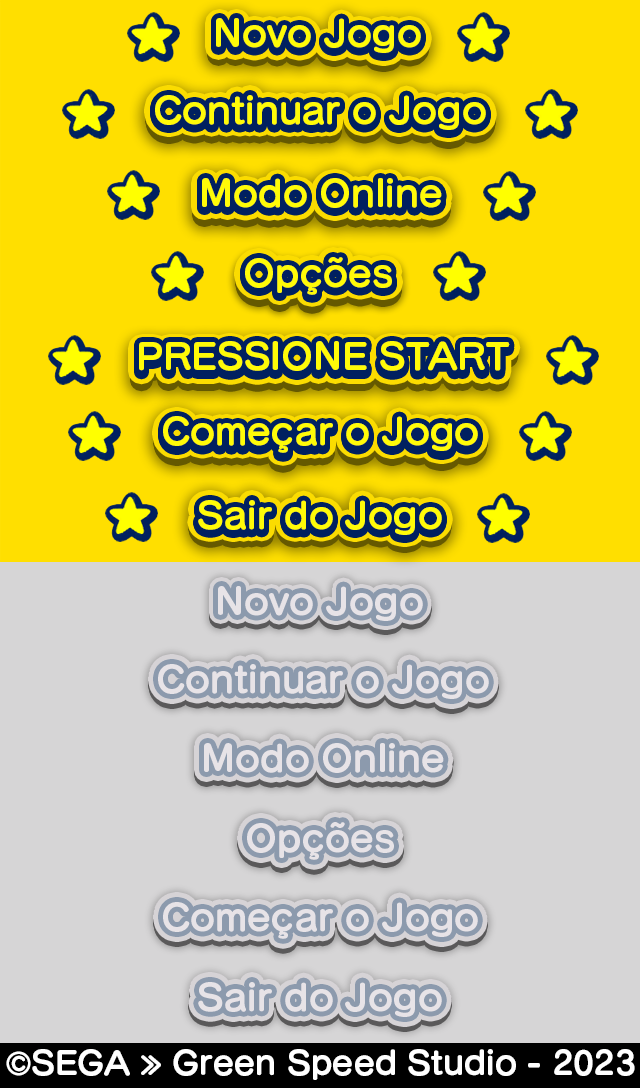
<style>
.page{position:relative;width:640px;height:1088px;background:#d6d5d6}
.page>*{position:absolute;margin:0}
.t1{font:36.1px "SeuratPro-B";color:#fffb08}
.t2{font:36.1px "SeuratPro-B"}
.t3{font:36.1px "SeuratPro-B";color:#e7e3e7}
.t4{font:32px "SeuratPro-B";color:#ffffff}
.t5{font:32px "SeuratPro-B"}
</style>
<div class="page">
<p class="t1" style="left:216px;top:20px;width:205px;height:35px">Novo Jogo</p>
<p class="t2" style="left:216px;top:21px;width:205px;height:35px">Novo Jogo</p>
<p class="t1" style="left:216px;top:20px;width:205px;height:35px">Novo Jogo</p>
<p class="t1" style="left:216px;top:19px;width:205px;height:35px">Novo Jogo</p>
<p class="t1" style="left:216px;top:18px;width:205px;height:35px">Novo Jogo</p>
<p class="t1" style="left:155px;top:96px;width:331px;height:35px">Continuar o Jogo</p>
<p class="t2" style="left:155px;top:98px;width:331px;height:35px">Continuar o Jogo</p>
<p class="t1" style="left:155px;top:97px;width:331px;height:35px">Continuar o Jogo</p>
<p class="t1" style="left:155px;top:96px;width:331px;height:35px">Continuar o Jogo</p>
<p class="t1" style="left:155px;top:95px;width:331px;height:35px">Continuar o Jogo</p>
<p class="t1" style="left:202px;top:180px;width:240px;height:30px">Modo Online</p>
<p class="t2" style="left:202px;top:181px;width:240px;height:30px">Modo Online</p>
<p class="t1" style="left:202px;top:180px;width:240px;height:30px">Modo Online</p>
<p class="t1" style="left:202px;top:179px;width:240px;height:30px">Modo Online</p>
<p class="t1" style="left:202px;top:178px;width:240px;height:30px">Modo Online</p>
<p class="t1" style="left:245px;top:257px;width:147px;height:38px">Opções</p>
<p class="t1" style="left:245px;top:258px;width:147px;height:38px">Opções</p>
<p class="t2" style="left:245px;top:259px;width:147px;height:38px">Opções</p>
<p class="t1" style="left:245px;top:258px;width:147px;height:38px">Opções</p>
<p class="t1" style="left:139px;top:342px;width:371px;height:30px">PRESSIONE START</p>
<p class="t1" style="left:139px;top:341px;width:371px;height:30px">PRESSIONE START</p>
<p class="t2" style="left:139px;top:344px;width:371px;height:30px">PRESSIONE START</p>
<p class="t1" style="left:139px;top:343px;width:371px;height:30px">PRESSIONE START</p>
<p class="t1" style="left:163px;top:418px;width:315px;height:37px">Começar o Jogo</p>
<p class="t1" style="left:163px;top:418px;width:315px;height:37px">Começar o Jogo</p>
<p class="t1" style="left:163px;top:416px;width:315px;height:37px">Começar o Jogo</p>
<p class="t1" style="left:198px;top:501px;width:244px;height:35px">Sair do Jogo</p>
<p class="t3" style="left:218px;top:586px;width:205px;height:35px">Novo Jogo</p>
<p class="t3" style="left:218px;top:586px;width:205px;height:35px">Novo Jogo</p>
<p class="t3" style="left:158px;top:664px;width:331px;height:35px">Continuar o Jogo</p>
<p class="t3" style="left:158px;top:664px;width:331px;height:35px">Continuar o Jogo</p>
<p class="t3" style="left:204px;top:743px;width:240px;height:30px">Modo Online</p>
<p class="t3" style="left:204px;top:743px;width:240px;height:30px">Modo Online</p>
<p class="t3" style="left:247px;top:822px;width:147px;height:38px">Opções</p>
<p class="t3" style="left:247px;top:822px;width:147px;height:38px">Opções</p>
<p class="t3" style="left:163px;top:902px;width:315px;height:37px">Começar o Jogo</p>
<p class="t3" style="left:163px;top:902px;width:315px;height:37px">Começar o Jogo</p>
<p class="t3" style="left:198px;top:982px;width:244px;height:35px">Sair do Jogo</p>
<p class="t3" style="left:198px;top:982px;width:244px;height:35px">Sair do Jogo</p>
<p class="t4" style="left:6px;top:1049px;width:629px;height:31px">©SEGA » Green Speed Studio - 2023</p>
<p class="t5" style="left:6px;top:1052px;width:629px;height:31px">©SEGA » Green Speed Studio - 2023</p>
<p class="t4" style="left:6px;top:1051px;width:629px;height:31px">©SEGA » Green Speed Studio - 2023</p>
<p class="t4" style="left:6px;top:1050px;width:629px;height:31px">©SEGA » Green Speed Studio - 2023</p>
</div>
